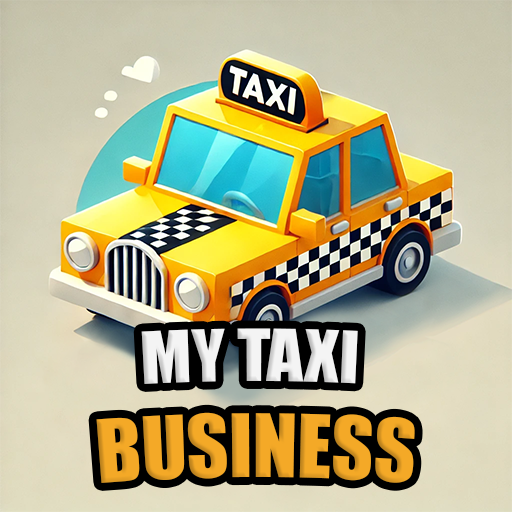
<style>
.page{position:relative;width:512px;height:512px}
.page>*{position:absolute;margin:0}
.t1{font:80px "Impact";color:#f4a927;text-transform:uppercase}
.t2{font:66px "Impact";color:#f4f4f4;text-transform:uppercase}
.t3{font:60px "Impact";color:#e2d9c0;text-transform:uppercase}
</style>
<div class="page">
<p class="t1" style="left:96px;top:328px;width:319px;height:155px;text-align:center"><span class="t2">My taxi</span><span class="t3"> <br></span>Business</p>
</div>
